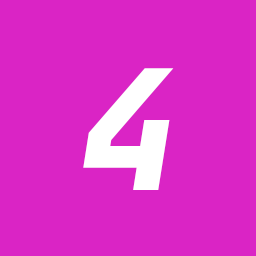
<style>
.page{position:relative;width:256px;height:256px;background:#da24c5}
.page>*{position:absolute;margin:0}
.t1{font:166.7px "JetBrainsMono-ExtraBoldItalic";color:#ffffff}
</style>
<div class="page">
<p class="t1" style="left:83px;top:68px;width:91px;height:122px">4</p>
</div>
